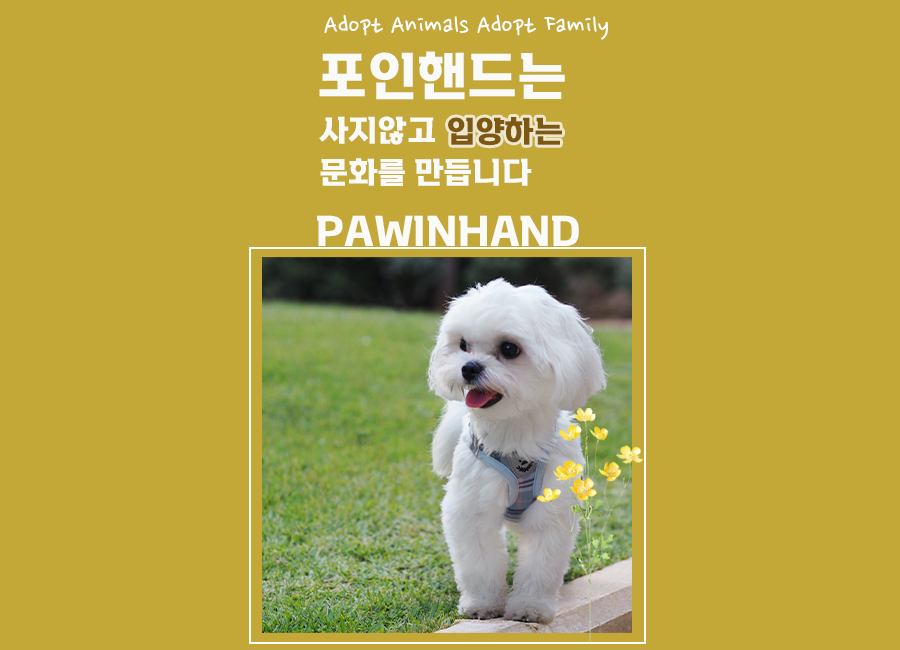
<style>
.page{position:relative;width:900px;height:650px;background:#c3a737}
.page>*{position:absolute;margin:0}
.t1{font:29.3px "NanumPen";color:#ffffff}
.t2{font:50.2px "ROKAF-Slab-Serif-Bold";color:#fafaf8}
.t3{font:29.3px/41.9px "ROKAF-Slab-Serif-Bold";color:#fafaf8}
.t4{font:29.3px "ROKAF-Slab-Serif-Bold";color:#7c5812}
.t5{font:39.2px "ROKAF-Slab-Serif-Bold";color:#fafaf8}
</style>
<div class="page">
<p class="t1" style="left:324px;top:14px;width:284px;height:26px">Adopt Animals Adopt Family</p>
<p class="t2" style="left:319px;top:51px;width:246px;height:49px">포인핸드는</p>
<p class="t3" style="left:319px;top:116px;width:213px;height:70px">사지않고<br>문화를 만듭니다</p>
<p class="t4" style="left:448px;top:117px;width:114px;height:29px">입양하는</p>
<p class="t5" style="left:317px;top:215px;width:262px;height:31px">PAWINHAND</p>
</div>
